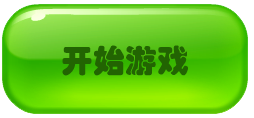
<style>
.page{position:relative;width:254px;height:118px}
.page>*{position:absolute;margin:0}
.t1{font:32px "STHupo";color:#226402}
</style>
<div class="page">
<p class="t1" style="left:62px;top:45px;width:126px;height:31px">开始游戏</p>
</div>
